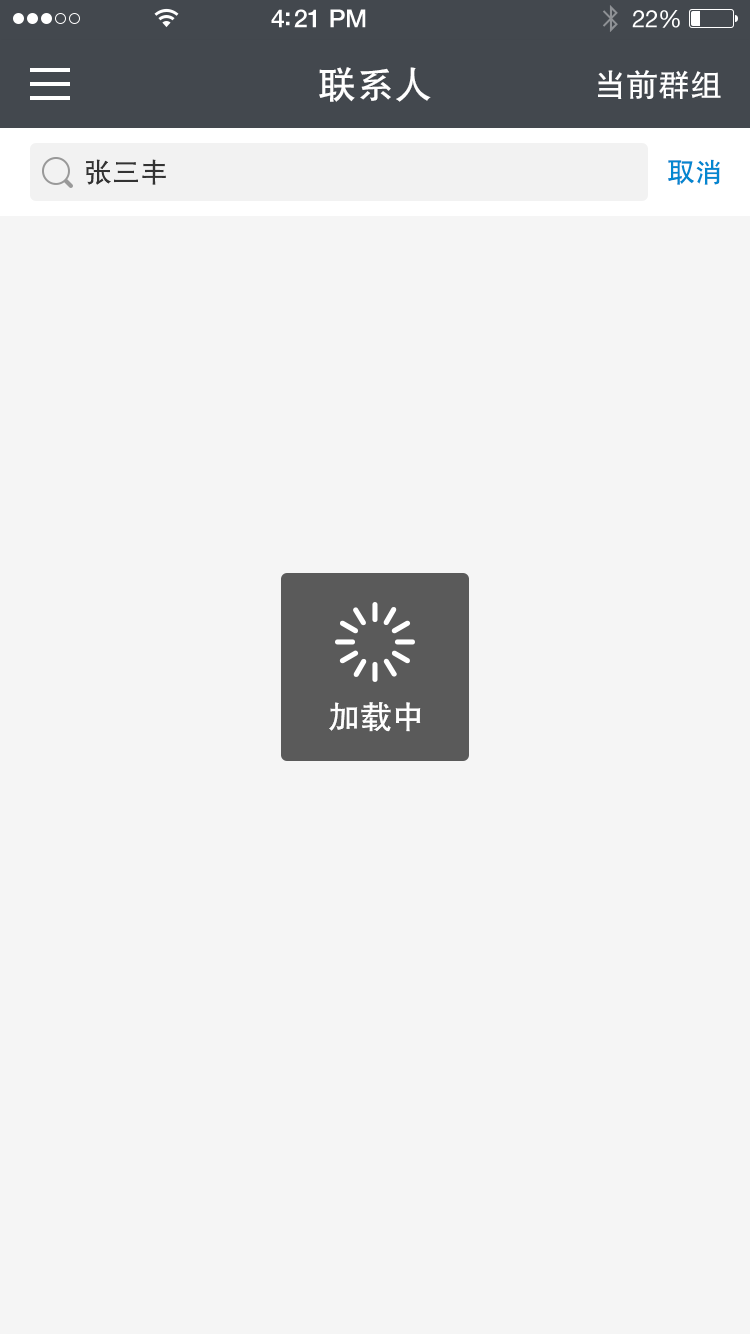
<style>
.page{position:relative;width:750px;height:1334px;background:#f5f5f5}
.page>*{position:absolute;margin:0}
.t1{font:38px "FZHTJW--GB1-0";color:#ffffff}
.t2{font:32px "FZHTJW--GB1-0";color:#ffffff}
.t3{font:28px "FZHTJW--GB1-0";color:#333333}
.t4{font:28px "FZHTJW--GB1-0";color:#0487d0}
</style>
<div class="page">
<p class="t1" style="left:319px;top:67px;width:112px;height:35px">联系人</p>
<p class="t2" style="left:598px;top:70px;width:123px;height:29px">当前群组</p>
<p class="t3" style="left:86px;top:159px;width:80px;height:26px">张三丰</p>
<p class="t4" style="left:668px;top:159px;width:52px;height:26px">取消</p>
<p class="t2" style="left:329px;top:702px;width:92px;height:30px">加载中</p>
</div>
